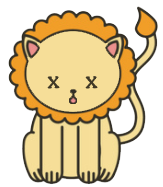
<style>
.page{position:relative;width:163px;height:187px;background:#ffffff}
.page>*{position:absolute;margin:0}
.t1{font:14px "1470JensonSemiBold";letter-spacing:-0.02em;color:#403927;font-weight:bold}
</style>
<div class="page">
<p class="t1" style="left:47px;top:76px;width:13px;height:13px">X</p>
<p class="t1" style="left:85px;top:76px;width:13px;height:13px">X</p>
</div>
